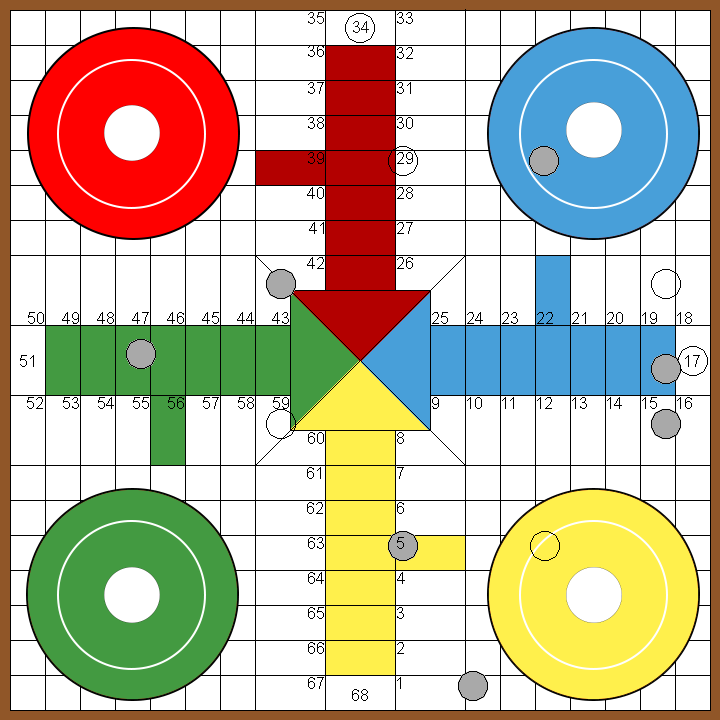
<style>
.page{position:relative;width:720px;height:720px;background:#ffffff}
.page>*{position:absolute;margin:0}
.t1{font:17px "ArialMT";color:#15120f}
.t2{font:17px "ArialMT";color:#000000}
</style>
<div class="page">
<p class="t1" style="left:308px;top:12px;width:16px;height:12px">35</p>
<p class="t2" style="left:397px;top:12px;width:16px;height:12px">33</p>
<p class="t1" style="left:353px;top:21px;width:16px;height:12px">34</p>
<p class="t2" style="left:308px;top:45px;width:16px;height:12px">36</p>
<p class="t2" style="left:397px;top:47px;width:16px;height:12px">32</p>
<p class="t2" style="left:308px;top:82px;width:16px;height:12px">37</p>
<p class="t2" style="left:397px;top:82px;width:14px;height:12px">31</p>
<p class="t2" style="left:308px;top:117px;width:16px;height:12px">38</p>
<p class="t2" style="left:397px;top:117px;width:16px;height:12px">30</p>
<p class="t2" style="left:308px;top:152px;width:16px;height:12px">39</p>
<p class="t2" style="left:397px;top:152px;width:16px;height:12px">29</p>
<p class="t2" style="left:307px;top:187px;width:17px;height:12px">40</p>
<p class="t2" style="left:397px;top:187px;width:16px;height:12px">28</p>
<p class="t2" style="left:309px;top:222px;width:15px;height:12px">41</p>
<p class="t2" style="left:397px;top:222px;width:16px;height:12px">27</p>
<p class="t2" style="left:307px;top:257px;width:17px;height:12px">42</p>
<p class="t2" style="left:397px;top:257px;width:16px;height:12px">26</p>
<p class="t2" style="left:28px;top:312px;width:16px;height:12px">50</p>
<p class="t2" style="left:62px;top:312px;width:17px;height:12px">49</p>
<p class="t2" style="left:97px;top:312px;width:17px;height:12px">48</p>
<p class="t2" style="left:132px;top:312px;width:17px;height:12px">47</p>
<p class="t2" style="left:167px;top:312px;width:17px;height:12px">46</p>
<p class="t2" style="left:202px;top:312px;width:17px;height:12px">45</p>
<p class="t2" style="left:237px;top:312px;width:17px;height:12px">44</p>
<p class="t2" style="left:272px;top:312px;width:17px;height:12px">43</p>
<p class="t2" style="left:432px;top:312px;width:16px;height:12px">25</p>
<p class="t2" style="left:467px;top:312px;width:16px;height:12px">24</p>
<p class="t2" style="left:502px;top:312px;width:16px;height:12px">23</p>
<p class="t2" style="left:537px;top:312px;width:16px;height:12px">22</p>
<p class="t2" style="left:572px;top:312px;width:14px;height:12px">21</p>
<p class="t2" style="left:607px;top:312px;width:16px;height:12px">20</p>
<p class="t2" style="left:642px;top:312px;width:15px;height:12px">19</p>
<p class="t2" style="left:677px;top:312px;width:15px;height:12px">18</p>
<p class="t2" style="left:20px;top:355px;width:14px;height:12px">51</p>
<p class="t2" style="left:685px;top:355px;width:15px;height:12px">17</p>
<p class="t2" style="left:27px;top:397px;width:16px;height:12px">52</p>
<p class="t2" style="left:63px;top:397px;width:16px;height:12px">53</p>
<p class="t2" style="left:98px;top:397px;width:16px;height:12px">54</p>
<p class="t2" style="left:133px;top:397px;width:16px;height:12px">55</p>
<p class="t2" style="left:168px;top:397px;width:16px;height:12px">56</p>
<p class="t2" style="left:203px;top:397px;width:16px;height:12px">57</p>
<p class="t2" style="left:238px;top:397px;width:16px;height:12px">58</p>
<p class="t2" style="left:273px;top:397px;width:16px;height:12px">59</p>
<p class="t2" style="left:432px;top:397px;width:7px;height:12px">9</p>
<p class="t2" style="left:467px;top:397px;width:15px;height:12px">10</p>
<p class="t2" style="left:502px;top:397px;width:12px;height:12px">11</p>
<p class="t2" style="left:537px;top:397px;width:15px;height:12px">12</p>
<p class="t2" style="left:572px;top:397px;width:15px;height:12px">13</p>
<p class="t2" style="left:607px;top:397px;width:15px;height:12px">14</p>
<p class="t2" style="left:642px;top:397px;width:15px;height:12px">15</p>
<p class="t2" style="left:677px;top:397px;width:15px;height:12px">16</p>
<p class="t2" style="left:308px;top:432px;width:16px;height:12px">60</p>
<p class="t2" style="left:397px;top:432px;width:7px;height:12px">8</p>
<p class="t2" style="left:307px;top:467px;width:14px;height:12px">61</p>
<p class="t2" style="left:397px;top:467px;width:7px;height:12px">7</p>
<p class="t2" style="left:307px;top:502px;width:16px;height:12px">62</p>
<p class="t2" style="left:397px;top:502px;width:7px;height:12px">6</p>
<p class="t2" style="left:308px;top:537px;width:16px;height:12px">63</p>
<p class="t2" style="left:397px;top:537px;width:7px;height:12px">5</p>
<p class="t2" style="left:308px;top:572px;width:16px;height:12px">64</p>
<p class="t2" style="left:397px;top:572px;width:8px;height:12px">4</p>
<p class="t2" style="left:308px;top:607px;width:16px;height:12px">65</p>
<p class="t2" style="left:397px;top:607px;width:7px;height:12px">3</p>
<p class="t2" style="left:308px;top:642px;width:16px;height:12px">66</p>
<p class="t2" style="left:397px;top:642px;width:7px;height:12px">2</p>
<p class="t2" style="left:308px;top:677px;width:16px;height:12px">67</p>
<p class="t2" style="left:397px;top:677px;width:4px;height:12px">1</p>
<p class="t2" style="left:352px;top:689px;width:16px;height:12px">68</p>
</div>
